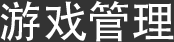
<style>
.page{position:relative;width:174px;height:42px;background:#333333}
.page>*{position:absolute;margin:0}
.t1{font:44.2px "AdobeHeitiStd-Regular";color:#ffffff}
</style>
<div class="page">
<p class="t1" style="left:0px;top:0px;width:174px;height:42px">游戏管理</p>
</div>
